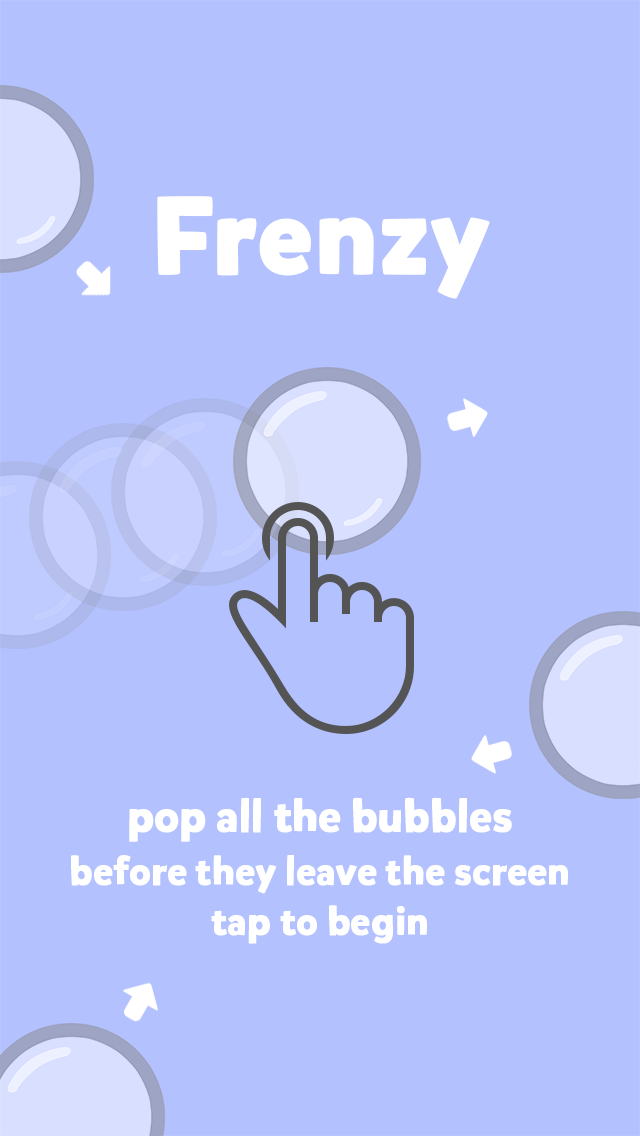
<style>
.page{position:relative;width:640px;height:1136px;background:#b3c1ff}
.page>*{position:absolute;margin:0}
.t1{font:107px "MikadoBoldDEMO";color:#ffffff;font-weight:bold}
.t2{font:43px "MikadoBoldDEMO";color:#ffffff;font-weight:bold}
.t3{font:38px "MikadoBoldDEMO";color:#ffffff;font-weight:bold}
</style>
<div class="page">
<p class="t1" style="left:157px;top:196px;width:333px;height:103px">Frenzy</p>
<p class="t2" style="left:129px;top:797px;width:383px;height:45px">pop all the bubbles</p>
<p class="t3" style="left:71px;top:855px;width:497px;height:39px">before they leave the screen</p>
<p class="t3" style="left:211px;top:905px;width:216px;height:39px">tap to begin</p>
</div>
